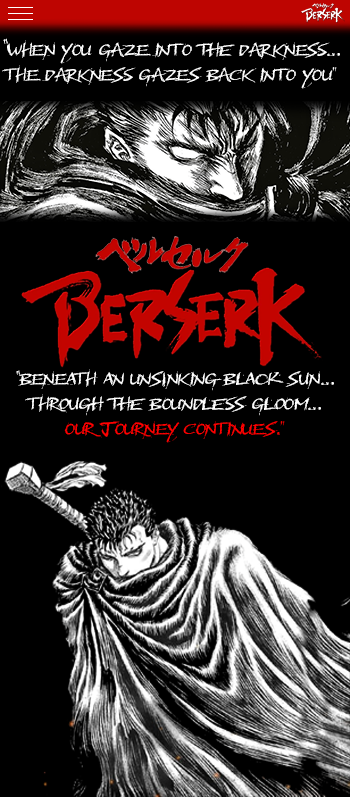
<style>
.page{position:relative;width:350px;height:797px;background:#000000}
.page>*{position:absolute;margin:0}
.t1{font:20.8px "BMXRadical";color:#ffffff}
.t2{font:25px "BMXRadical";color:#ffffff}
.t3{font:20.8px "BMXRadical";color:#ff0000}
</style>
<div class="page">
<p class="t1" style="left:2px;top:38px;width:338px;height:51px;text-align:center"><span class="t2">“</span>when you gaze into the darkness...<br>the darkness gazes back into you”</p>
<p class="t1" style="left:16px;top:369px;width:318px;height:74px">“Beneath an unsinking black sun...<br>through the boundless gloom...<br><span class="t3">our journey continues.”</span></p>
</div>
